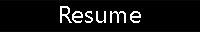
<style>
.page{position:relative;width:200px;height:32px;background:#000000}
.page>*{position:absolute;margin:0}
.t1{font:24px "SegoeUI";color:#ffffff}
</style>
<div class="page">
<p class="t1" style="left:60px;top:6px;width:81px;height:17px">Resume</p>
</div>
